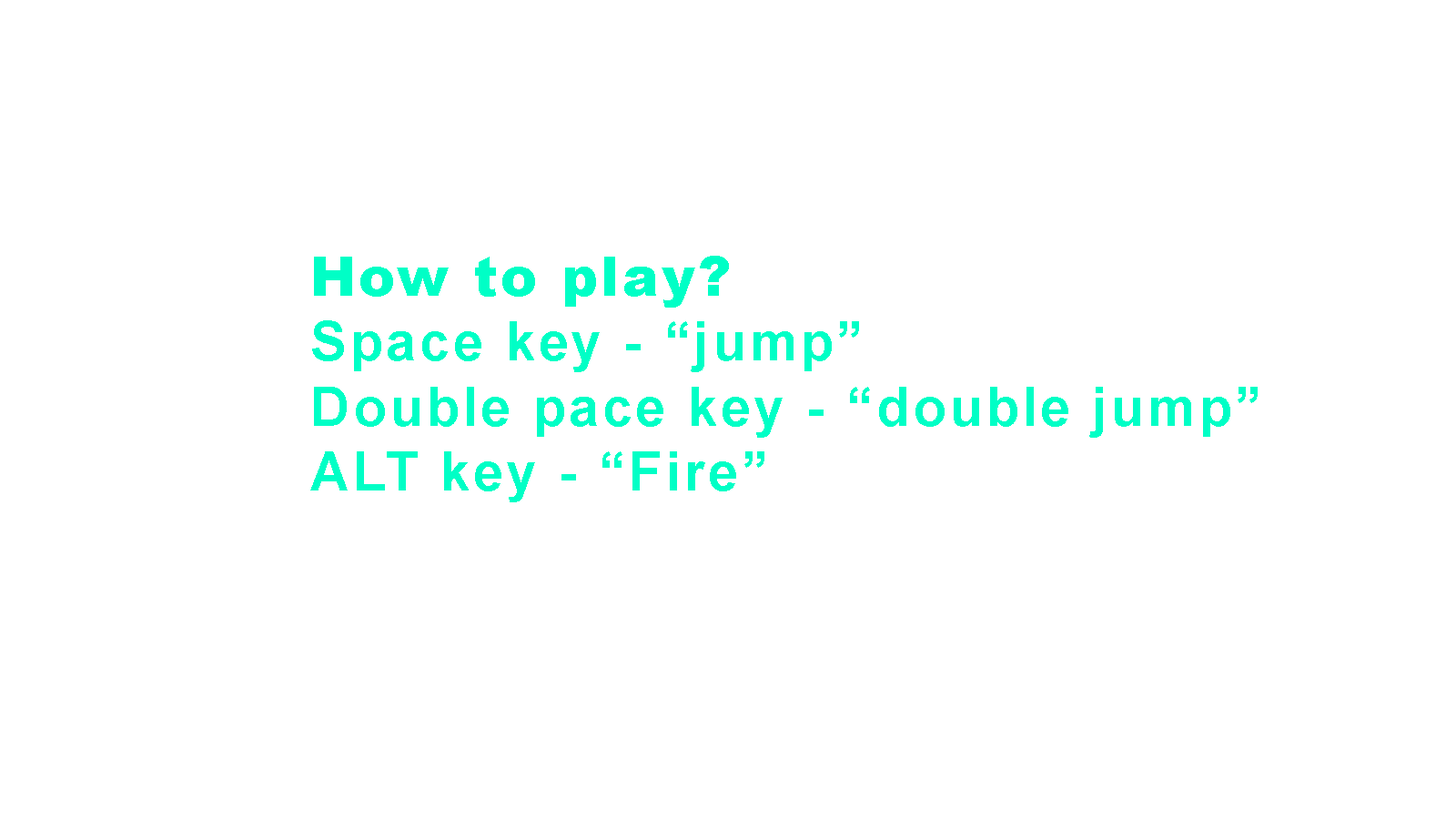
<style>
.page{position:relative;width:1456px;height:819px;background:#ffffff}
.page>*{position:absolute;margin:0}
.t1{font:54.3px "Arial-BoldMT";letter-spacing:0.06em;color:#00ffc6}
.t2{font:54.3px "Arial-Black";letter-spacing:0.06em;color:#00ffc6}
</style>
<div class="page">
<p class="t1" style="left:310px;top:256px;width:948px;height:246px"><span class="t2">How to play?<br></span>Space key - “jump”<br>Double pace key - “double jump”<br>ALT key - “Fire”</p>
</div>
